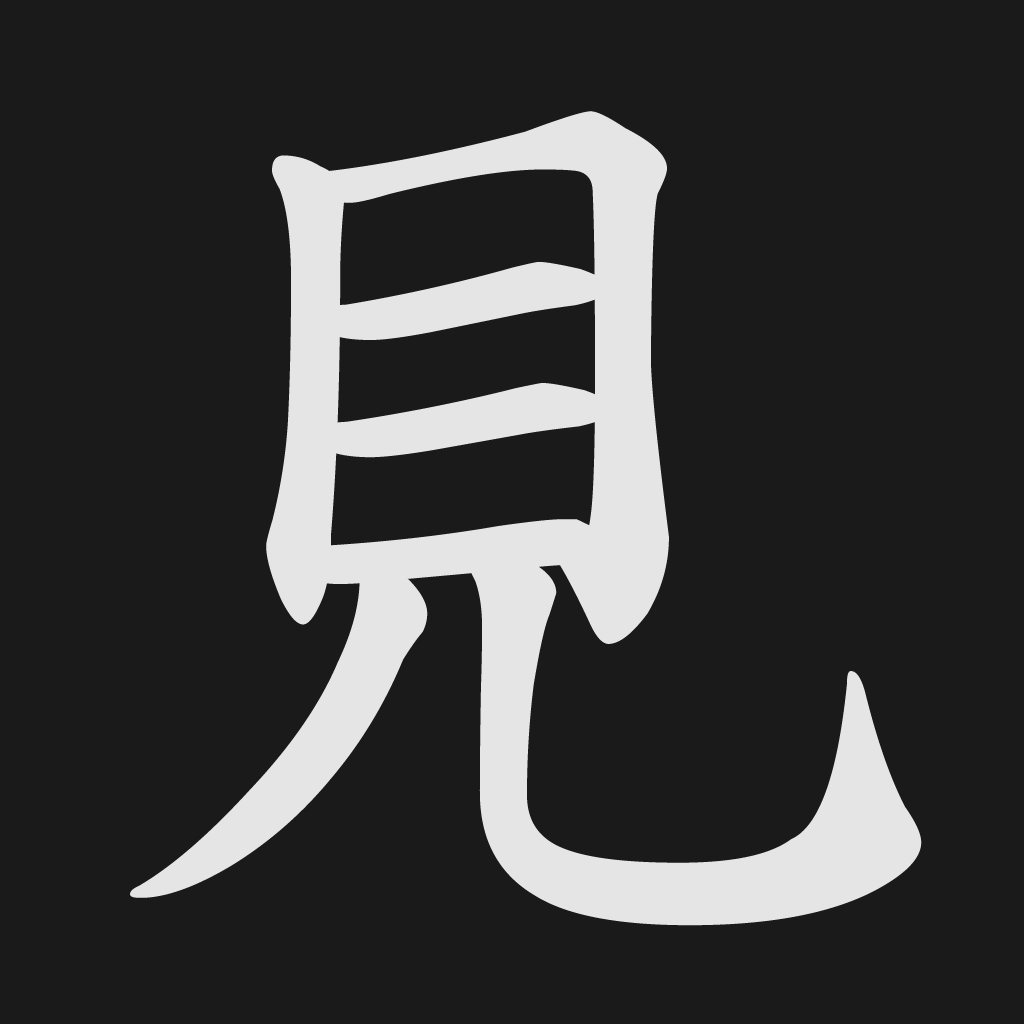
<style>
.page{position:relative;width:1024px;height:1024px;background:#1a1a1a}
.page>*{position:absolute;margin:0}
.t1{font:1000px "DFKaiShu-SB-Estd-BF";letter-spacing:-0.1em;color:#e5e5e5}
</style>
<div class="page">
<p class="t1" style="left:130px;top:111px;width:792px;height:815px">見</p>
</div>
